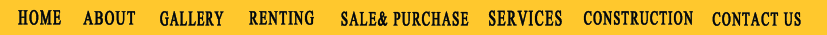
<style>
.page{position:relative;width:827px;height:35px;background:#ffc82d}
.page>*{position:absolute;margin:0}
.t1{font:31px "MicrosoftHimalaya";letter-spacing:0.05em;color:#060808;font-weight:bold;scale:0.62 1}
.t2{font:28.9px "MicrosoftHimalaya";letter-spacing:0.05em;color:#060808;font-weight:bold;scale:0.68 1}
.t3{font:30.5px "MicrosoftHimalaya";letter-spacing:0.05em;color:#060808;font-weight:bold;scale:0.58 1}
.t4{font:28.9px "MicrosoftHimalaya";letter-spacing:0.05em;color:#060808;font-weight:bold;scale:0.66 1}
.t5{font:29.6px "MicrosoftHimalaya";letter-spacing:0.05em;color:#060808;font-weight:bold;scale:0.63 1}
.t6{font:32.1px "MicrosoftHimalaya";letter-spacing:0.05em;color:#060808;font-weight:bold;scale:0.62 1}
.t7{font:28.6px "MicrosoftHimalaya";letter-spacing:0.05em;color:#060808;font-weight:bold;scale:0.63 1}
.t8{font:28.1px "MicrosoftHimalaya";letter-spacing:0.05em;color:#060808;font-weight:bold;scale:0.64 1}
</style>
<div class="page">
<p class="t1" style="left:18px;top:9px;width:43px;height:16px">HOME</p>
<p class="t2" style="left:83px;top:10px;width:53px;height:15px">ABOUT</p>
<p class="t3" style="left:160px;top:11px;width:64px;height:15px">GALLERY</p>
<p class="t4" style="left:249px;top:10px;width:65px;height:15px">RENTING</p>
<p class="t5" style="left:341px;top:11px;width:128px;height:15px">SALE&amp; PURCHASE</p>
<p class="t6" style="left:488px;top:10px;width:74px;height:16px">SERVICES</p>
<p class="t7" style="left:583px;top:10px;width:110px;height:15px">CONSTRUCTION</p>
<p class="t8" style="left:712px;top:12px;width:89px;height:14px">CONTACT US</p>
</div>
